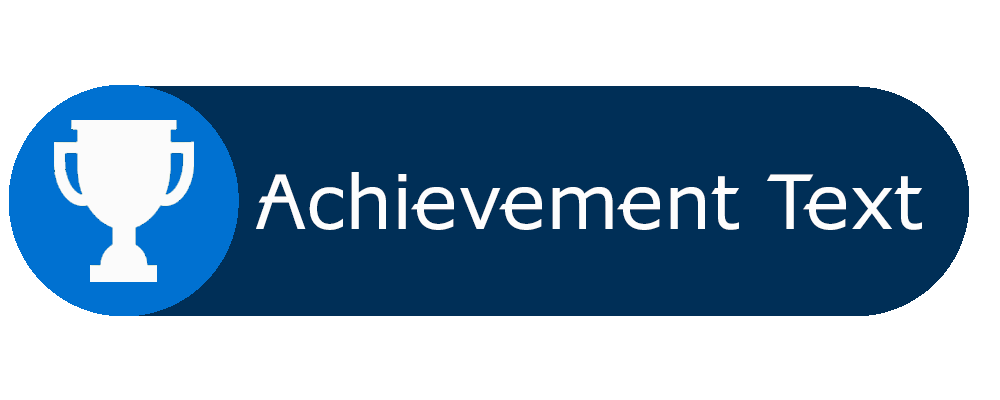
<style>
.page{position:relative;width:1000px;height:400px;background:#ffffff}
.page>*{position:absolute;margin:0}
.t1{font:75px "XBOX360";color:#fefefe}
</style>
<div class="page">
<p class="t1" style="left:256px;top:172px;width:666px;height:58px">Achievement Text</p>
</div>
